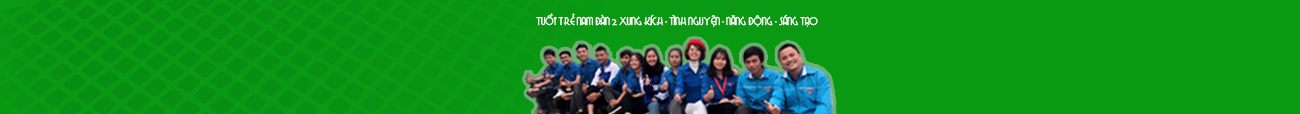
<style>
.page{position:relative;width:1300px;height:114px;background:#099913}
.page>*{position:absolute;margin:0}
.t1{font:10px "UTM-Gradoo";color:#ffffff}
</style>
<div class="page">
<p class="t1" style="left:536px;top:13px;width:282px;height:14px">Tuổi trẻ Nam Đàn 2 Xung Kích - Tình Nguyện - Năng Động - Sáng Tạo</p>
</div>
